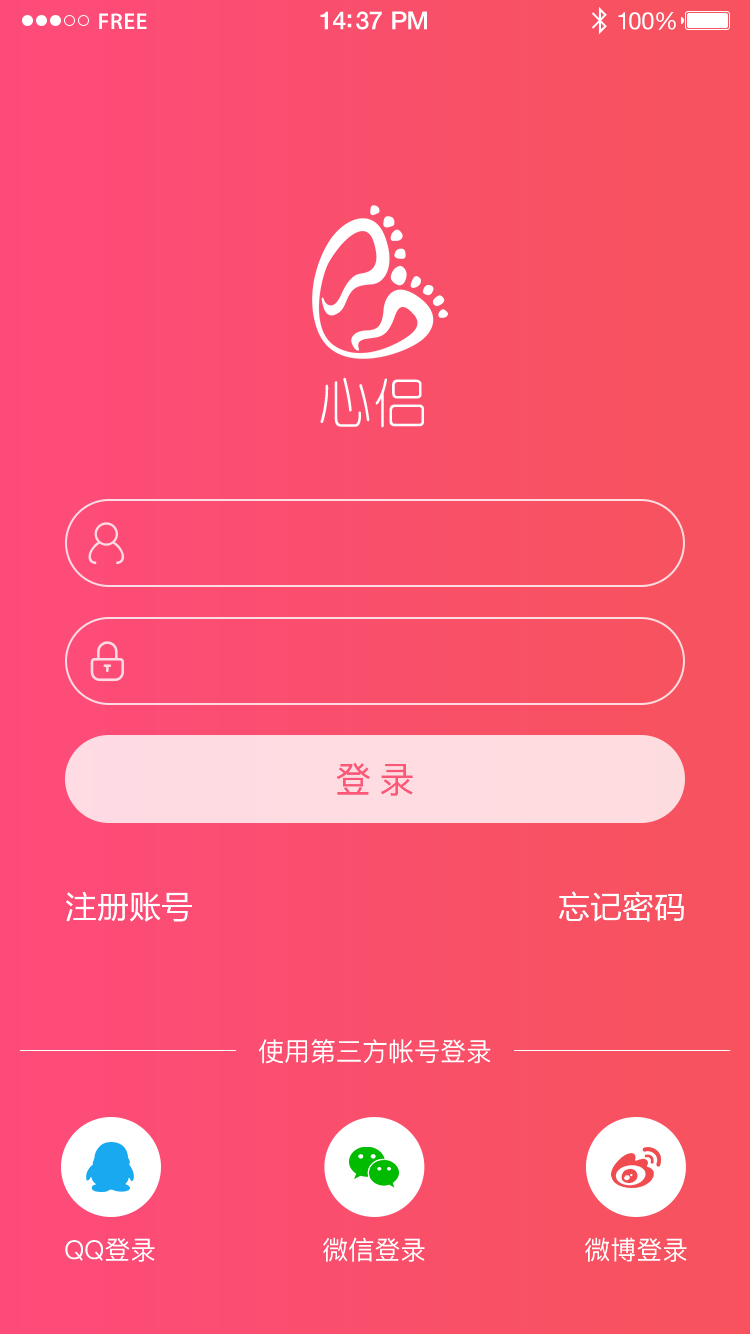
<style>
.page{position:relative;width:750px;height:1334px}
.page>*{position:absolute;margin:0}
.t1{font:23px "MyriadPro-Semibold";letter-spacing:0.02em;color:#ffffff}
.t2{font:25px "HelveticaNeue-Medium";letter-spacing:-0.02em;color:#ffffff}
.t3{font:24px "HelveticaNeue";letter-spacing:-0.02em;color:#ffffff}
.t4{font:53.9px "YouYuan";letter-spacing:0.05em;color:#ffffff}
.t5{font:36px "PingFang-SC-Medium";letter-spacing:0.2em;color:#fb5877}
.t6{font:32px "FZLTHJW--GB1-0";color:#ffffff;text-transform:uppercase}
.t7{font:26px "PingFang-SC-Medium";color:#ffffff;text-transform:uppercase}
</style>
<div class="page">
<p class="t1" style="left:99px;top:13px;width:48px;height:16px">FREE</p>
<p class="t2" style="left:320px;top:11px;width:107px;height:19px">14:37 PM</p>
<p class="t3" style="left:618px;top:12px;width:58px;height:18px">100%</p>
<p class="t4" style="left:320px;top:377px;width:104px;height:51px">心侣</p>
<p class="t5" style="left:336px;top:762px;width:77px;height:34px">登录</p>
<p class="t6" style="left:66px;top:891px;width:126px;height:31px">注册账号</p>
<p class="t6" style="left:559px;top:891px;width:125px;height:31px">忘记密码</p>
<p class="t7" style="left:258px;top:1039px;width:233px;height:25px">使用第三方帐号登录</p>
<p class="t7" style="left:65px;top:1238px;width:90px;height:24px">QQ登录</p>
<p class="t7" style="left:323px;top:1237px;width:102px;height:25px">微信登录</p>
<p class="t7" style="left:585px;top:1237px;width:102px;height:25px">微博登录</p>
</div>
